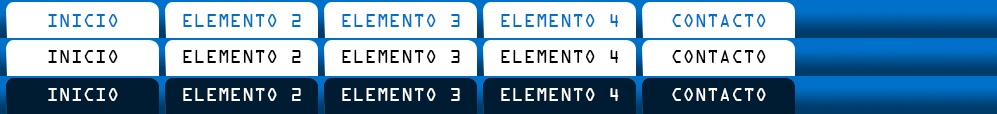
<style>
.page{position:relative;width:997px;height:114px;background:#ffffff}
.page>*{position:absolute;margin:0}
.t1{font:20px "OCRAExtended";color:#0071ca}
.t2{font:20px "OCRAExtended";color:#000000}
.t3{font:20px "OCRAExtended";color:#ffffff}
</style>
<div class="page">
<p class="t1" style="left:48px;top:14px;width:70px;height:13px">INICIO</p>
<p class="t1" style="left:183px;top:14px;width:118px;height:13px">ELEMENTO 2</p>
<p class="t1" style="left:342px;top:14px;width:118px;height:13px">ELEMENTO 3</p>
<p class="t1" style="left:501px;top:14px;width:118px;height:13px">ELEMENTO 4</p>
<p class="t1" style="left:672px;top:14px;width:94px;height:13px">CONTACTO</p>
<p class="t2" style="left:48px;top:50px;width:70px;height:13px">INICIO</p>
<p class="t2" style="left:183px;top:50px;width:118px;height:13px">ELEMENTO 2</p>
<p class="t2" style="left:342px;top:50px;width:118px;height:13px">ELEMENTO 3</p>
<p class="t2" style="left:501px;top:50px;width:118px;height:13px">ELEMENTO 4</p>
<p class="t2" style="left:672px;top:50px;width:94px;height:13px">CONTACTO</p>
<p class="t3" style="left:48px;top:88px;width:70px;height:13px">INICIO</p>
<p class="t3" style="left:183px;top:88px;width:118px;height:13px">ELEMENTO 2</p>
<p class="t3" style="left:342px;top:88px;width:118px;height:13px">ELEMENTO 3</p>
<p class="t3" style="left:501px;top:88px;width:118px;height:13px">ELEMENTO 4</p>
<p class="t3" style="left:672px;top:88px;width:94px;height:13px">CONTACTO</p>
</div>
